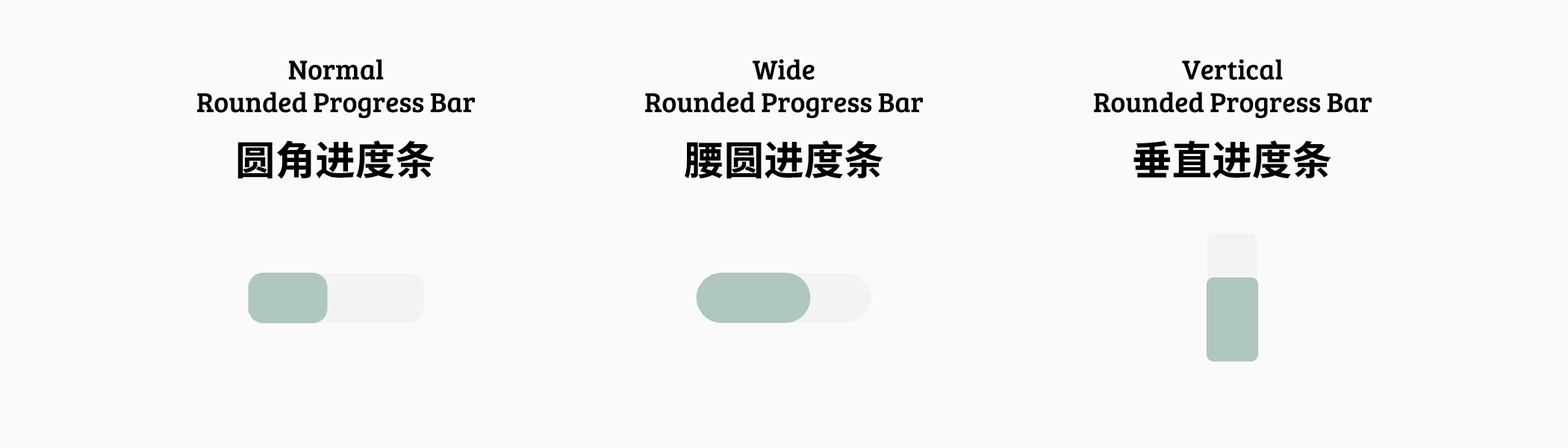
<style>
.page{position:relative;width:1568px;height:448px;background:#fafafa}
.page>*{position:absolute;margin:0}
.t1{font:28px/32.7px "BreeSerif-Regular";color:#000000}
.t2{font:40px "SourceHanSansSC-Bold";color:#000000}
</style>
<div class="page">
<p class="t1" style="left:197px;top:59px;width:278px;height:60px;text-align:center">Normal<br>Rounded Progress Bar</p>
<p class="t1" style="left:645px;top:59px;width:278px;height:60px;text-align:center">Wide<br>Rounded Progress Bar</p>
<p class="t1" style="left:1094px;top:59px;width:278px;height:60px;text-align:center">Vertical<br>Rounded Progress Bar</p>
<p class="t2" style="left:237px;top:140px;width:198px;height:39px">圆角进度条</p>
<p class="t2" style="left:685px;top:140px;width:198px;height:38px">腰圆进度条</p>
<p class="t2" style="left:1133px;top:140px;width:198px;height:38px">垂直进度条</p>
</div>
